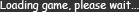
<style>
.page{position:relative;width:139px;height:12px;background:#333333}
.page>*{position:absolute;margin:0}
.t1{font:11px "ComicSansMS";color:#ffffff}
</style>
<div class="page">
<p class="t1" style="left:0px;top:0px;width:139px;height:12px">Loading game, please wait...</p>
</div>
